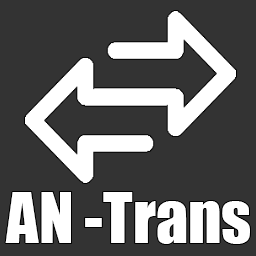
<style>
.page{position:relative;width:256px;height:256px;background:#333333}
.page>*{position:absolute;margin:0}
.t1{font:64px "Impact";color:#ffffff}
</style>
<div class="page">
<p class="t1" style="left:5px;top:192px;width:245px;height:52px">AN -Trans</p>
</div>
